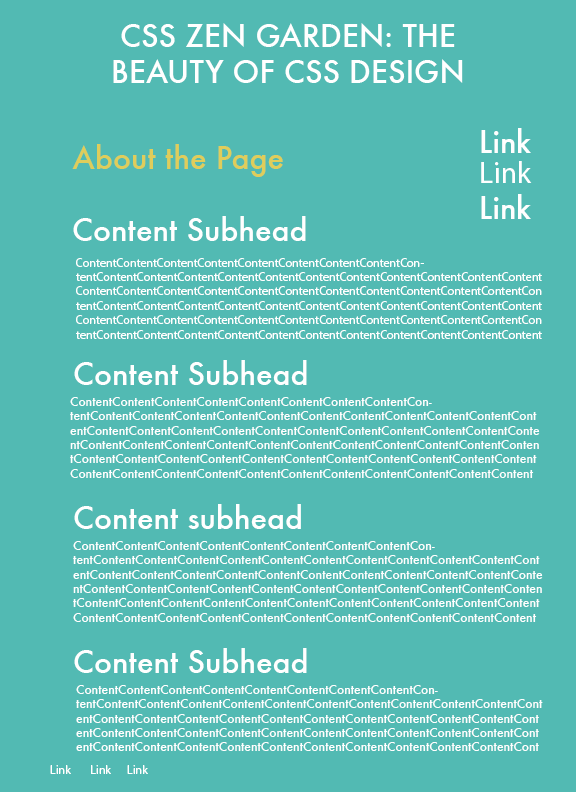
<style>
.page{position:relative;width:576px;height:792px;background:#52bab3}
.page>*{position:absolute;margin:0}
.t1{font:30px "Futura-Medium";color:#ffffff}
.t2{font:30px "Futura-Medium";color:#dfcd5b}
.t3{font:30px "MyriadPro-Regular";color:#ffffff}
.t4{font:12px "MyriadPro-Regular";color:#ffffff}
.t5{font:12px "Futura-Medium";color:#ffffff}
</style>
<div class="page">
<p class="t1" style="left:113px;top:23px;width:350px;height:60px;text-align:center">CSS ZEN GARDEN: THE BEAUTY OF CSS DESIGN</p>
<p class="t1" style="left:481px;top:128px;width:50px;height:25px">Link</p>
<p class="t2" style="left:72px;top:144px;width:211px;height:33px">About the Page</p>
<p class="t3" style="left:481px;top:161px;width:51px;height:22px">Link</p>
<p class="t1" style="left:481px;top:194px;width:50px;height:25px">Link</p>
<p class="t1" style="left:73px;top:216px;width:233px;height:25px">Content Subhead</p>
<p class="t4" style="left:76px;top:258px;width:466px;height:81px">ContentContentContentContentContentContentContentContentContentContentContentContentContentContentContentContentContentContentContentContentContentContentContentContentContentContentContentContentContentContentContentContentContentContentContentContentContentContentContentContentContentContentContentContentContentContentContentContentContentContentContentContentContentContentContentContentContentContentContentContentContentContentContentContentContentContent</p>
<p class="t1" style="left:74px;top:360px;width:233px;height:25px">Content Subhead</p>
<p class="t5" style="left:70px;top:397px;width:470px;height:81px">ContentContentContentContentContentContentContentContentContentContentContentContentContentContentContentContentContentContentContentContentContentContentContentContentContentContentContentContentContentContentContentContentContentContentContentContentContentContentContentContentContentContentContentContentContentContentContentContentContentContentContentContentContentContentContentContentContentContentContentContentContentContentContentContent</p>
<p class="t1" style="left:74px;top:504px;width:227px;height:25px">Content subhead</p>
<p class="t5" style="left:73px;top:541px;width:470px;height:81px">ContentContentContentContentContentContentContentContentContentContentContentContentContentContentContentContentContentContentContentContentContentContentContentContentContentContentContentContentContentContentContentContentContentContentContentContentContentContentContentContentContentContentContentContentContentContentContentContentContentContentContentContentContentContentContentContentContentContentContentContentContentContentContentContentContent</p>
<p class="t1" style="left:74px;top:648px;width:233px;height:25px">Content Subhead</p>
<p class="t5" style="left:76px;top:685px;width:467px;height:66px">ContentContentContentContentContentContentContentContentContentContentContentContentContentContentContentContentContentContentContentContentContentContentContentContentContentContentContentContentContentContentContentContentContentContentContentContentContentContentContentContentContentContentContentContentContentContentContentContentContentContentContentContentContent</p>
<p class="t4" style="left:50px;top:765px;width:21px;height:9px">Link</p>
<p class="t4" style="left:91px;top:765px;width:20px;height:9px">Link</p>
<p class="t4" style="left:127px;top:765px;width:21px;height:9px">Link</p>
</div>
